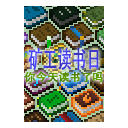
<style>
.page{position:relative;width:128px;height:128px;background:#ffffff}
.page>*{position:absolute;margin:0}
.t1{font:24px "AdobeHeitiStd-Regular";font-weight:bold;scale:0.6 1}
.t2{font:11px "AdobeHeitiStd-Regular";color:#62a600;font-weight:bold}
</style>
<div class="page">
<p class="t1" style="left:28px;top:47px;width:71px;height:24px">矿工读书日</p>
<p class="t2" style="left:24px;top:71px;width:79px;height:12px">你今天读书了吗</p>
</div>
